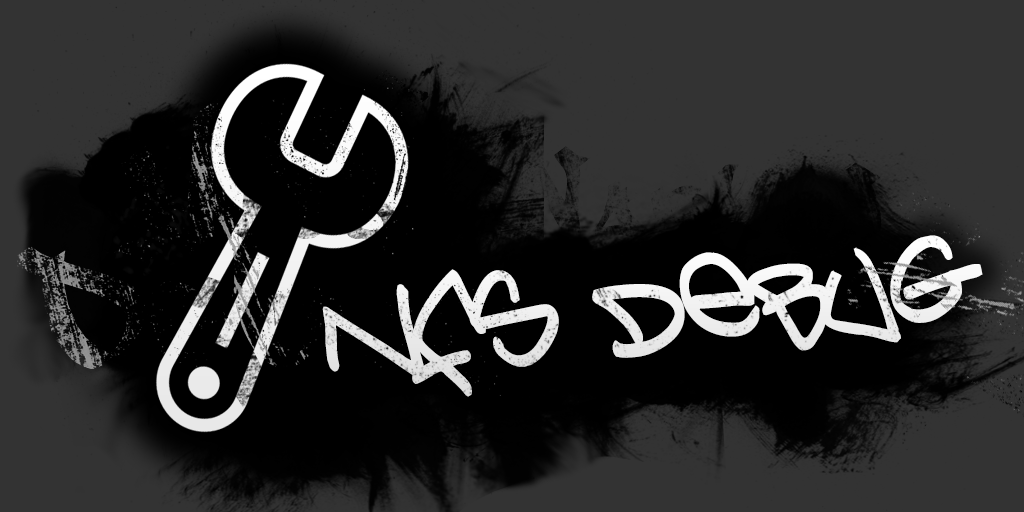
<style>
.page{position:relative;width:1024px;height:512px;background:#333333}
.page>*{position:absolute;margin:0}
.t1{font:123px "Bringthanoize";color:#ffffff}
</style>
<div class="page">
<p class="t1" style="left:322px;top:235px;width:661px;height:162px;rotate:-6deg">nfs debug</p>
</div>
